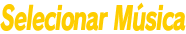
<style>
.page{position:relative;width:186px;height:34px;background:#ffffff}
.page>*{position:absolute;margin:0}
.t1{font:32px "RodinPro-EB";letter-spacing:-0.051em;color:#fecd00;font-style:italic;scale:0.66 1}
</style>
<div class="page">
<p class="t1" style="left:0px;top:2px;width:186px;height:29px">Selecionar Música</p>
</div>
